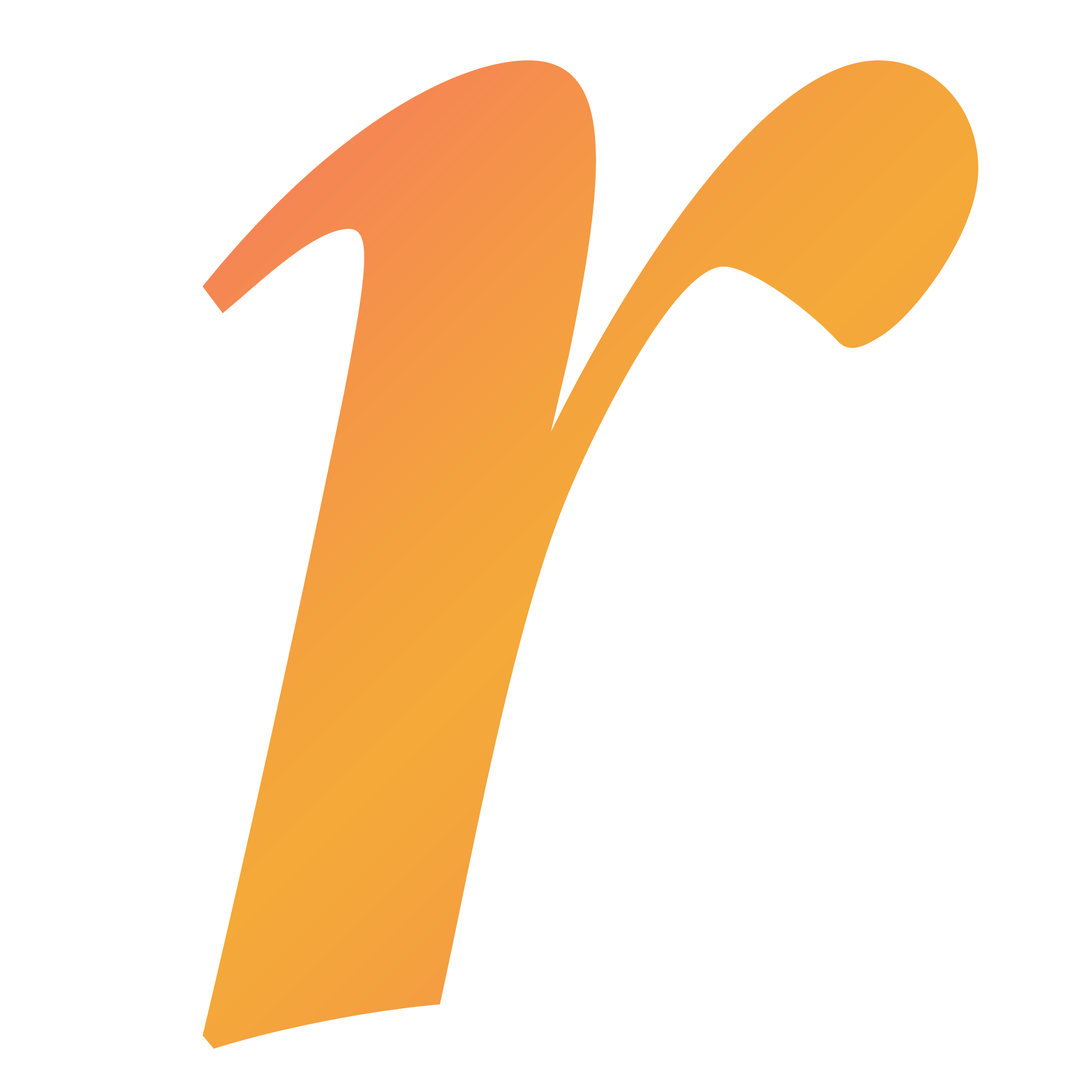
<style>
.page{position:relative;width:1092px;height:1092px;background:#ffffff}
.page>*{position:absolute;margin:0}
.t1{font:2215.7px "MinionConceptItalic-DisplayBoldItalic";color:#f4a33d}
</style>
<div class="page">
<p class="t1" style="left:203px;top:60px;width:775px;height:989px">r</p>
</div>
